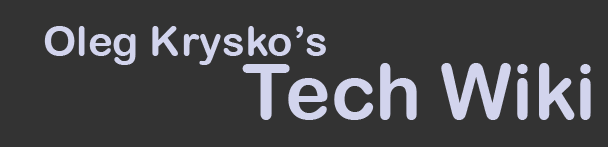
<style>
.page{position:relative;width:608px;height:147px;background:#333333}
.page>*{position:absolute;margin:0}
.t1{font:42.4px "ArialRoundedMTBold";color:#d2d4ed}
.t2{font:76.8px "ArialRoundedMTBold";color:#d2d4ed}
</style>
<div class="page">
<p class="t1" style="left:44px;top:26px;width:282px;height:39px">Oleg Krysko’s</p>
<p class="t2" style="left:242px;top:63px;width:349px;height:57px">Tech Wiki</p>
</div>
